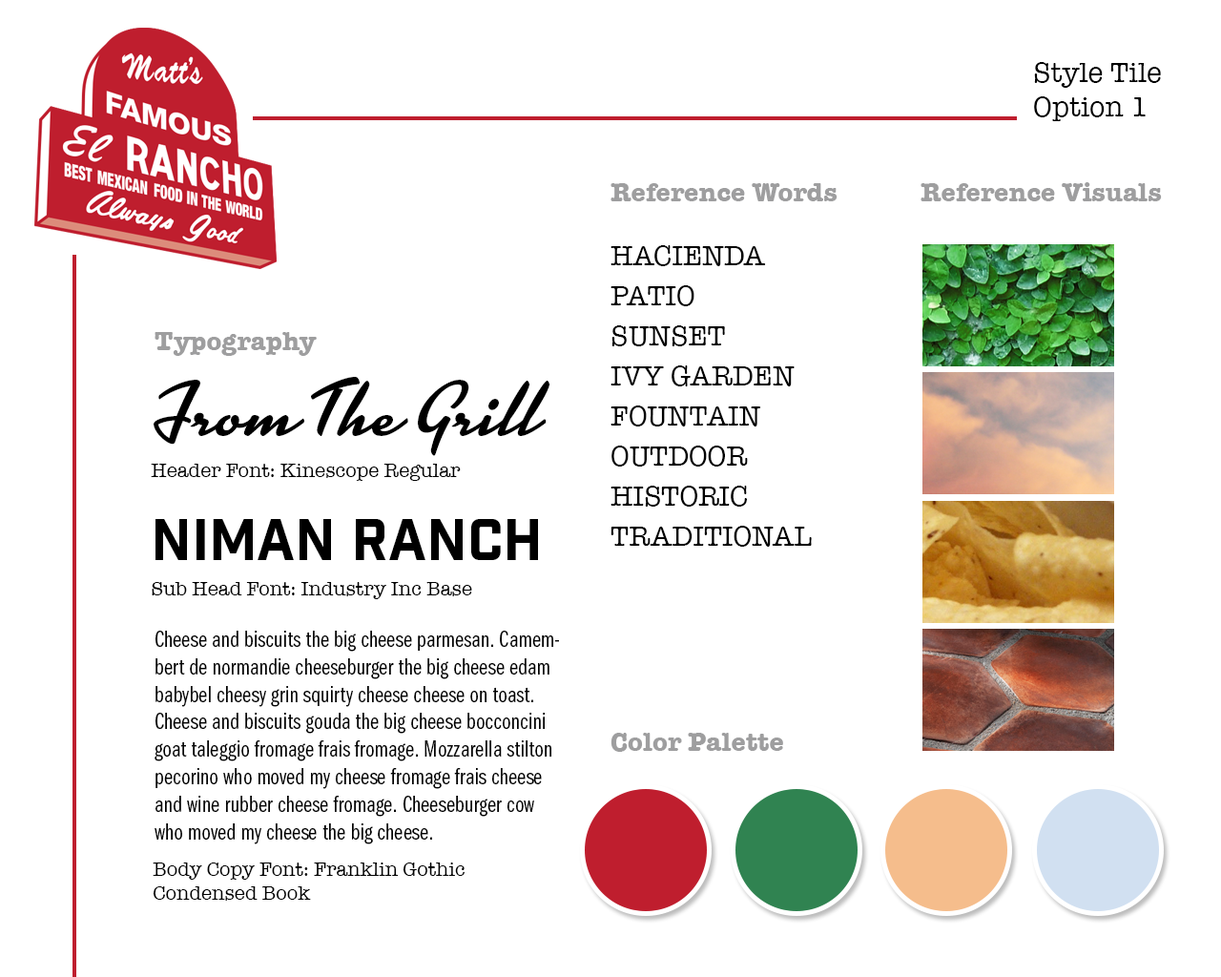
<style>
.page{position:relative;width:1221px;height:977px;background:#ffffff}
.page>*{position:absolute;margin:0}
.t1{font:28.6px "AmericanTypewriter";color:#000000}
.t2{font:26.7px "AmericanTypewriter-Bold";color:#9e9e9f}
.t3{font:28.6px/40.1px "AmericanTypewriter";color:#000000}
.t4{font:76.3px "Kinescope";color:#000000}
.t5{font:20px "AmericanTypewriter";color:#000000}
.t6{font:57.2px "IndustryInc-Base";color:#000000}
.t7{font:22.9px "FranklinGothicURWCom-Boo";letter-spacing:0.005em;color:#000000}
</style>
<div class="page">
<p class="t1" style="left:1034px;top:62px;width:127px;height:59px">Style Tile<br>Option 1</p>
<p class="t2" style="left:610px;top:183px;width:227px;height:18px">Reference Words</p>
<p class="t2" style="left:920px;top:182px;width:242px;height:19px">Reference Visuals</p>
<p class="t3" style="left:610px;top:245px;width:202px;height:302px">HACIENDA<br>PATIO<br>SUNSET<br>IVY GARDEN<br>FOUNTAIN<br>OUTDOOR<br>HISTORIC<br>TRADITIONAL</p>
<p class="t2" style="left:155px;top:332px;width:162px;height:24px">Typography</p>
<p class="t4" style="left:154px;top:377px;width:395px;height:79px">From The Grill</p>
<p class="t5" style="left:151px;top:464px;width:310px;height:17px">Header Font: Kinescope Regular</p>
<p class="t6" style="left:155px;top:519px;width:383px;height:41px">Niman Ranch</p>
<p class="t5" style="left:152px;top:582px;width:320px;height:17px">Sub Head Font: Industry Inc Base</p>
<p class="t7" style="left:155px;top:630px;width:404px;height:214px">Cheese and biscuits the big cheese parmesan. Camembert de normandie cheeseburger the big cheese edam babybel cheesy grin squirty cheese cheese on toast. Cheese and biscuits gouda the big cheese bocconcini goat taleggio fromage frais fromage. Mozzarella stilton pecorino who moved my cheese fromage frais cheese<br>and wine rubber cheese fromage. Cheeseburger cow<br>who moved my cheese the big cheese.</p>
<p class="t2" style="left:610px;top:733px;width:173px;height:19px">Color Palette</p>
<p class="t5" style="left:153px;top:862px;width:312px;height:38px">Body Copy Font: Franklin Gothic<br>Condensed Book</p>
</div>
